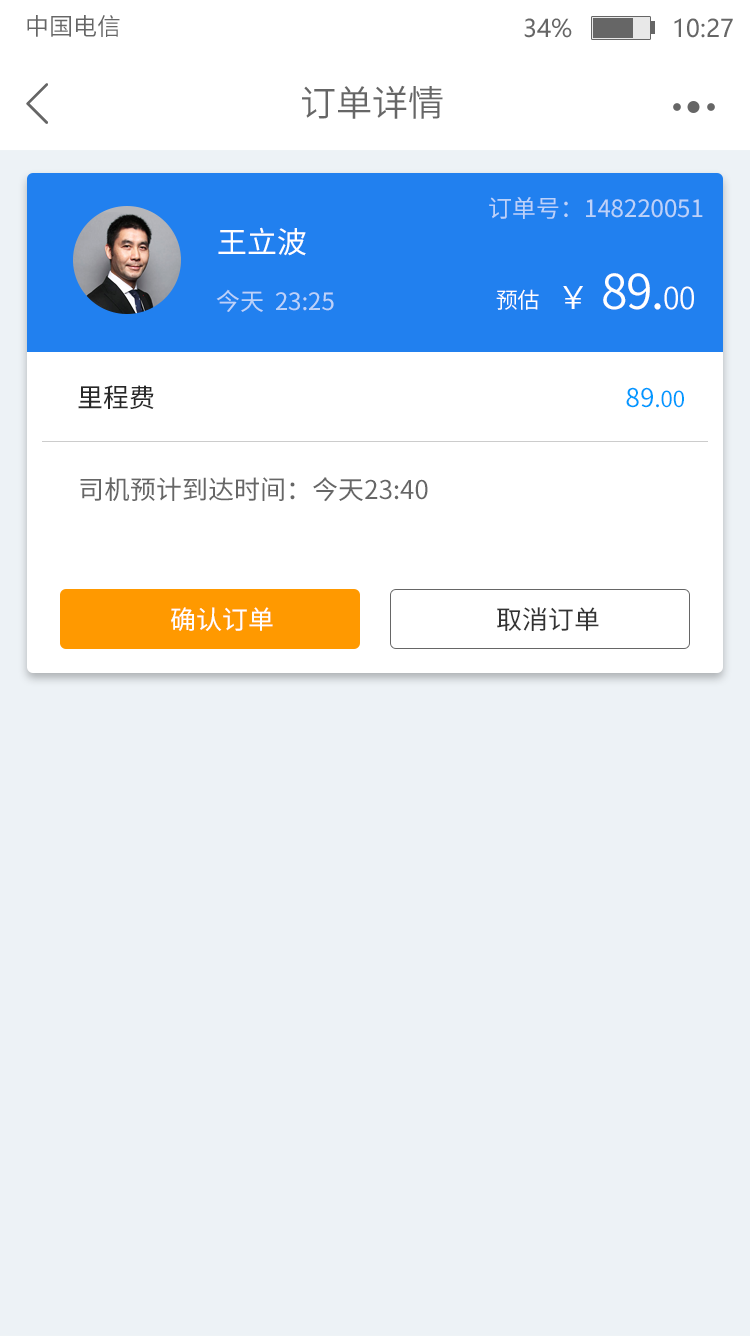
<style>
.page{position:relative;width:750px;height:1336px;background:#edf2f6}
.page>*{position:absolute;margin:0}
.t1{font:24px "SourceHanSansCN-Normal";color:#666666}
.t2{font:24px "MicrosoftYaHei";color:#666666}
.t3{font:36px "SourceHanSansCN-Normal";color:#666666}
.t4{font:24px "SourceHanSansCN-Regular";color:#bcd2f9}
.t5{font:30px "SourceHanSansCN-Regular";color:#ffffff}
.t6{font:48.2px "SourceHanSansCN-Normal";letter-spacing:-0.025em;color:#ffffff}
.t7{font:32.2px "SourceHanSansCN-Normal";letter-spacing:-0.025em;color:#ffffff}
.t8{font:30px "SourceHanSansCN-Normal";letter-spacing:-0.025em;color:#ffffff}
.t9{font:22px "SourceHanSansCN-Normal";letter-spacing:-0.025em;color:#ffffff}
.t10{font:26px "SourceHanSansCN-Regular";color:#282828}
.t11{font:22px "SourceHanSansCN-Regular";color:#0099ff}
.t12{font:26px "SourceHanSansCN-Regular";color:#0099ff}
.t13{font:26px "SourceHanSansCN-Regular";color:#666666}
.t14{font:26px "SourceHanSansCN-Regular";color:#ffffff}
.t15{font:26px "SourceHanSansCN-Regular";color:#333333}
</style>
<div class="page">
<p class="t1" style="left:27px;top:15px;width:93px;height:22px">中国电信</p>
<p class="t2" style="left:524px;top:18px;width:209px;height:20px">34%              10:27</p>
<p class="t3" style="left:302px;top:85px;width:141px;height:34px">订单详情</p>
<p class="t4" style="left:489px;top:197px;width:214px;height:22px">订单号：148220051</p>
<p class="t5" style="left:218px;top:227px;width:88px;height:29px">王立波</p>
<p class="t6" style="left:563px;top:273px;width:131px;height:37px"><span class="t7">￥  </span>89.<span class="t8">00</span></p>
<p class="t4" style="left:216px;top:289px;width:118px;height:23px">今天  23:25</p>
<p class="t9" style="left:496px;top:289px;width:43px;height:21px">预估</p>
<p class="t10" style="left:78px;top:385px;width:76px;height:24px">里程费</p>
<p class="t11" style="left:626px;top:387px;width:58px;height:21px"><span class="t12">89</span>.00</p>
<p class="t13" style="left:80px;top:477px;width:348px;height:25px">司机预计到达时间：今天23:40</p>
<p class="t14" style="left:171px;top:607px;width:102px;height:24px">确认订单</p>
<p class="t15" style="left:497px;top:607px;width:102px;height:24px">取消订单</p>
</div>
